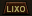
<style>
.page{position:relative;width:32px;height:16px}
.page>*{position:absolute;margin:0}
.t1{font:7.8px "ArialMT";letter-spacing:0.1em;color:#a59c5a;scale:0.91 1}
</style>
<div class="page">
<p class="t1" style="left:7px;top:6px;width:18px;height:6px">LIXO</p>
</div>
